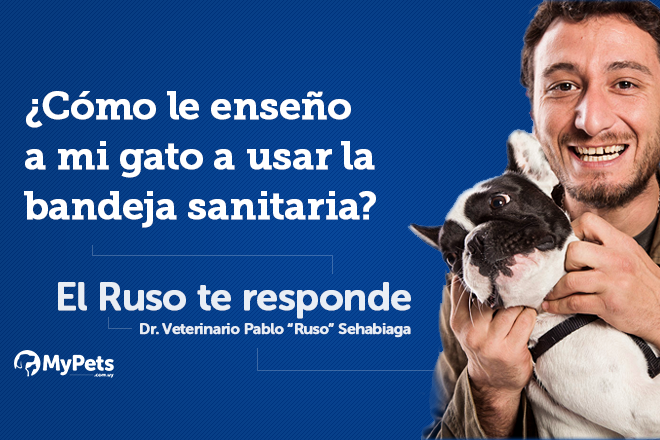
<style>
.page{position:relative;width:660px;height:440px}
.page>*{position:absolute;margin:0}
.t1{font:38.8px/50px "MuseoSlab-700";letter-spacing:-0.02em;color:#ffffff;font-weight:bold}
.t2{font:38.8px "MuseoSansRounded-700";letter-spacing:-0.02em;color:#ffffff;font-weight:bold}
.t3{font:15.2px "MuseoSansRounded-700";letter-spacing:-0.02em;color:#ffffff;font-weight:bold}
</style>
<div class="page">
<p class="t1" style="left:24px;top:91px;width:352px;height:137px">¿Cómo le enseño<br>a mi gato a usar la<br>bandeja sanitaria?</p>
<p class="t2" style="left:58px;top:282px;width:353px;height:37px">El Ruso te responde</p>
<p class="t3" style="left:140px;top:323px;width:271px;height:15px">Dr. Veterinario Pablo “Ruso” Sehabiaga</p>
</div>
